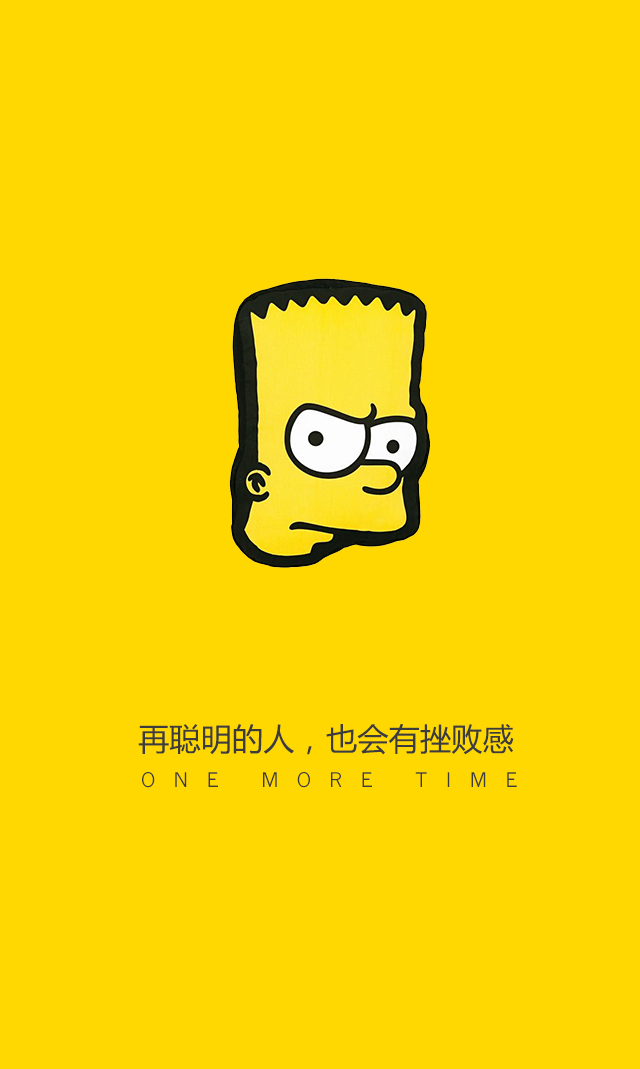
<style>
.page{position:relative;width:640px;height:1069px;background:#ffd802}
.page>*{position:absolute;margin:0}
.t1{font:31.3px "MicrosoftYaHei";color:#3c3c3c}
.t2{font:19.9px "NewsGothicMT";letter-spacing:0.9em;color:#3c3c3c}
</style>
<div class="page">
<p class="t1" style="left:138px;top:724px;width:376px;height:31px">再聪明的人，也会有挫败感</p>
<p class="t2" style="left:142px;top:772px;width:375px;height:16px">ONE MORE TIME</p>
</div>
